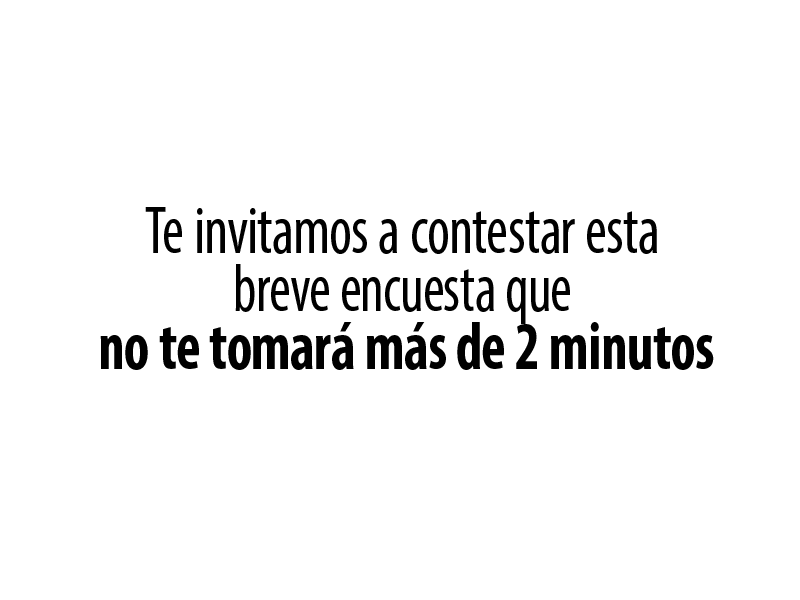
<style>
.page{position:relative;width:800px;height:600px;background:#ffffff}
.page>*{position:absolute;margin:0}
.t1{font:68px/58px "MyriadPro-Cond";color:#000000;scale:0.89 1}
.t2{font:68px/58px "MyriadPro-Cond";color:#000000;scale:0.87 1}
.t3{font:68px/58px "MyriadPro-BoldCond";color:#000000;scale:0.86 1}
.t4{font:68px/58px "MyriadPro-BoldCond";color:#000000;scale:0.88 1}
</style>
<div class="page">
<p class="t1" style="left:100px;top:207px;width:614px;height:163px;text-align:justify">Te invitamos a contestar esta<br><span class="t2">breve encuesta que<br></span><span class="t3">no te tomará más de 2 minu</span><span class="t4">tos</span></p>
</div>
